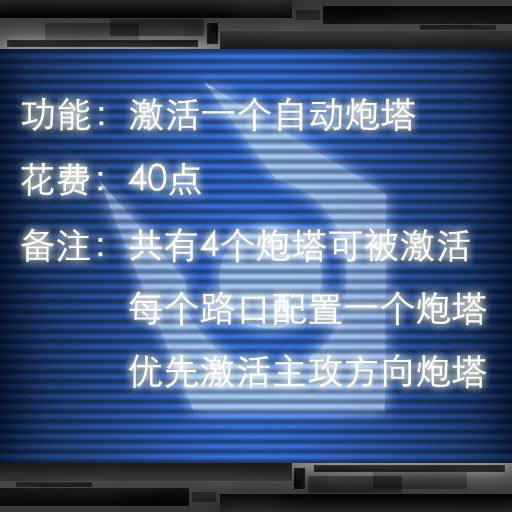
<style>
.page{position:relative;width:512px;height:512px}
.page>*{position:absolute;margin:0}
.t1{font:36px "STXihei";color:#ffffff}
</style>
<div class="page">
<p class="t1" style="left:21px;top:97px;width:395px;height:35px">功能：激活一个自动炮塔</p>
<p class="t1" style="left:21px;top:163px;width:180px;height:33px">花费：40点</p>
<p class="t1" style="left:20px;top:228px;width:467px;height:161px">备注：共有4个炮塔可被激活<br>            每个路口配置一个炮塔<br>            优先激活主攻方向炮塔</p>
</div>
